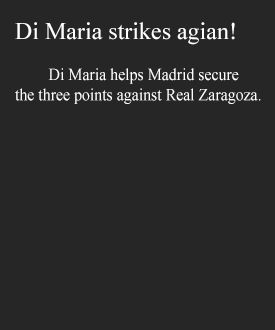
<style>
.page{position:relative;width:275px;height:330px;background:#262626}
.page>*{position:absolute;margin:0}
.t1{font:24px "TimesNewRomanPSMT";color:#ffffff}
.t2{font:17px "TimesNewRomanPSMT";color:#ffffff;scale:0.93 1}
</style>
<div class="page">
<p class="t1" style="left:15px;top:22px;width:220px;height:23px">Di Maria strikes agian!</p>
<p class="t2" style="left:15px;top:68px;width:246px;height:36px">Di Maria helps Madrid secure <br>the three points against Real Zaragoza.</p>
</div>
